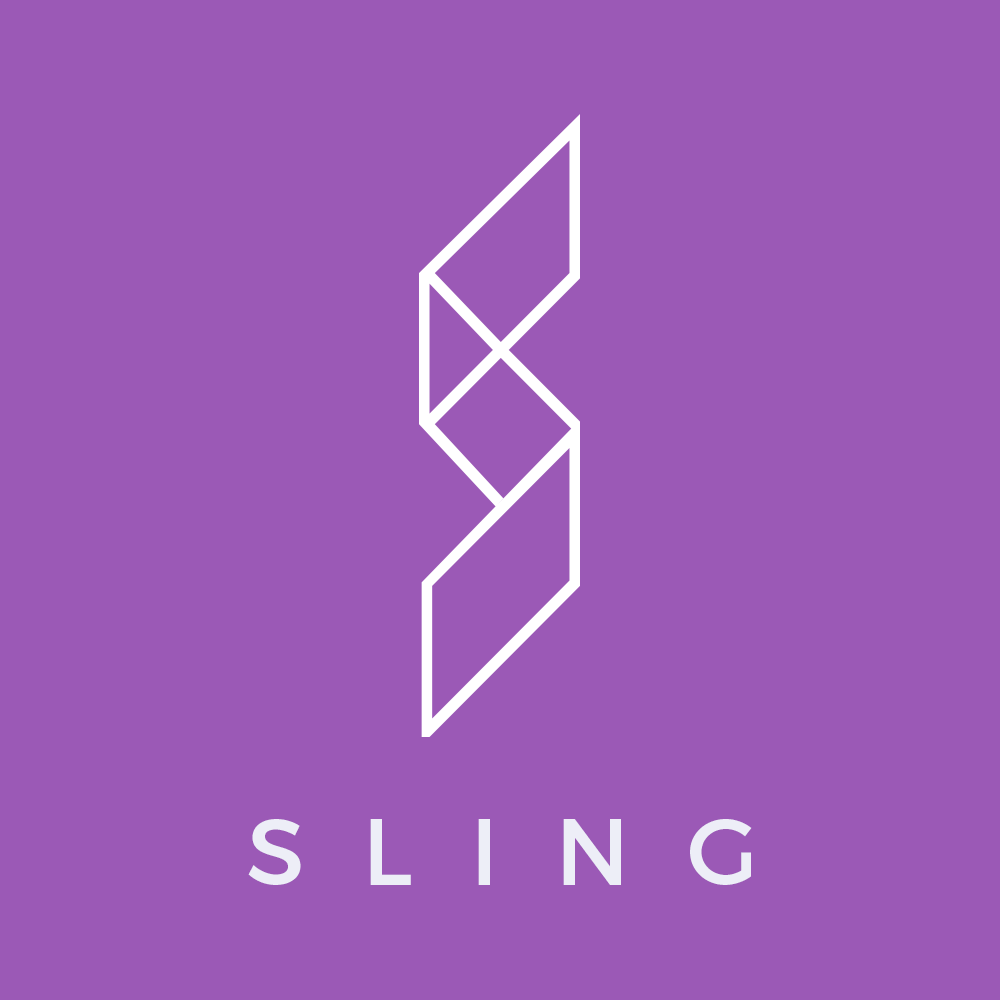
<style>
.page{position:relative;width:1000px;height:1000px;background:#9b59b6}
.page>*{position:absolute;margin:0}
.t1{font:94.8px "Montserrat-Regular";letter-spacing:0.6em;color:#edeef7;text-transform:uppercase}
</style>
<div class="page">
<p class="t1" style="left:248px;top:819px;width:504px;height:66px">sling</p>
</div>
